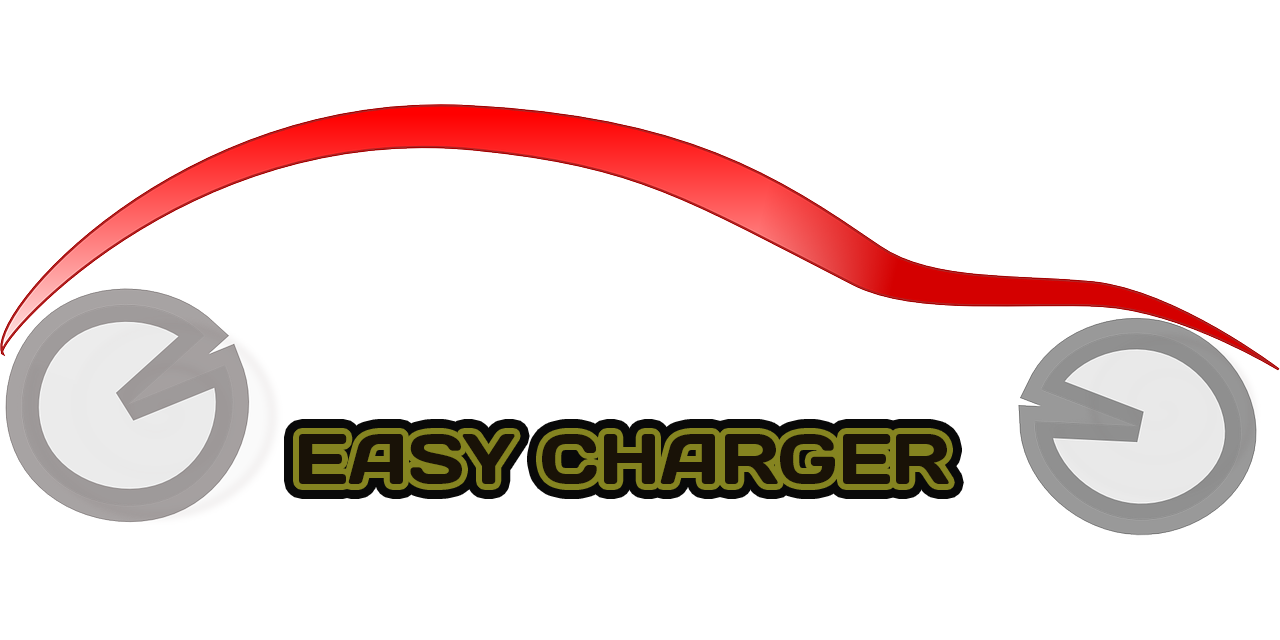
<style>
.page{position:relative;width:1280px;height:640px;background:#ffffff}
.page>*{position:absolute;margin:0}
.t1{font:72px "Days";color:#191207}
</style>
<div class="page">
<p class="t1" style="left:299px;top:434px;width:650px;height:50px">EASY CHARGER</p>
</div>
